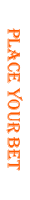
<style>
.page{position:relative;width:30px;height:200px;background:#ffffff}
.page>*{position:absolute;margin:0}
.t1{font:18px "Algerian";color:#ff5a00}
</style>
<div class="page">
<p class="t1" style="left:6px;top:28px;width:17px;height:143px;rotate:90deg">PLACE YOUR BET</p>
</div>
